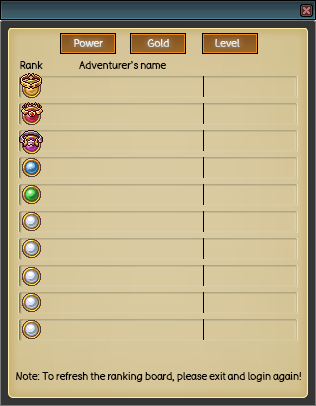
<style>
.page{position:relative;width:316px;height:406px}
.page>*{position:absolute;margin:0}
.t1{font:10px "BadComic";color:#ffffff}
.t2{font:10px "BadComic";color:#ebebeb}
.t3{font:10px "BadComic";color:#000000}
</style>
<div class="page">
<p class="t1" style="left:74px;top:39px;width:29px;height:8px">Power</p>
<p class="t2" style="left:147px;top:39px;width:22px;height:8px">Gold</p>
<p class="t2" style="left:215px;top:39px;width:25px;height:8px">Level</p>
<p class="t3" style="left:20px;top:61px;width:23px;height:8px">Rank</p>
<p class="t3" style="left:79px;top:61px;width:88px;height:8px">Adventurer’s name</p>
<p class="t3" style="left:16px;top:372px;width:285px;height:10px">Note: To refresh the ranking board, please exit and login again!</p>
</div>
